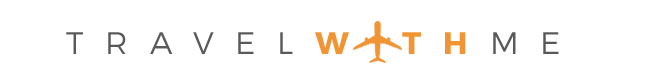
<style>
.page{position:relative;width:649px;height:81px;background:#ffffff}
.page>*{position:absolute;margin:0}
.t1{font:31.2px "Montserrat-Light";letter-spacing:0.7em;color:#595959;text-transform:uppercase}
.t2{font:31.2px "Montserrat-Bold";letter-spacing:0.7em;color:#f19434;text-transform:uppercase}
</style>
<div class="page">
<p class="t1" style="left:66px;top:32px;width:493px;height:22px">Travel<span class="t2">w th</span>me</p>
</div>
